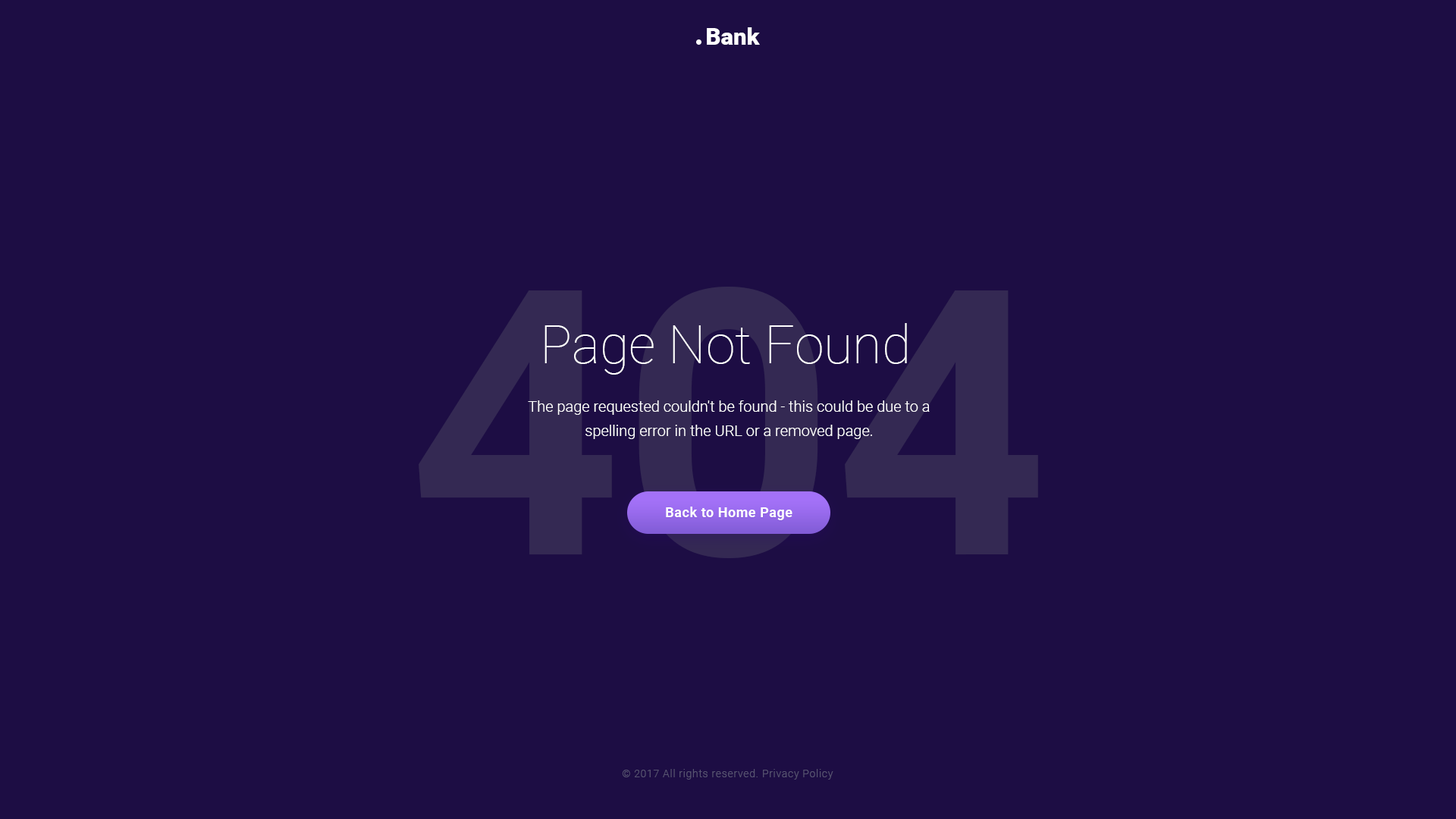
<style>
.page{position:relative;width:1456px;height:819px;background:#1d0d44}
.page>*{position:absolute;margin:0}
.t1{font:22.7px "Roboto-Black";color:#ffffff;scale:1.04 1}
.t2{font:371.6px "Roboto-Bold";color:#342953}
.t3{font:53.1px "Roboto-Thin";color:#ffffff}
.t4{font:15.2px/24.3px "Roboto-Light";color:#ffffff}
.t5{font:13.6px "Roboto-Bold";letter-spacing:0.03em;color:#ffffff}
.t6{font:10.6px "Roboto-Light";letter-spacing:0.05em;color:#585471}
</style>
<div class="page">
<p class="t1" style="left:707px;top:27px;width:53px;height:18px">Bank</p>
<p class="t2" style="left:419px;top:287px;width:619px;height:271px">404</p>
<p class="t3" style="left:544px;top:323px;width:363px;height:52px">Page Not Found</p>
<p class="t4" style="left:528px;top:400px;width:402px;height:39px;text-align:center">The page requested couldn't be found - this could be due to a spelling error in the URL or a removed page.</p>
<p class="t5" style="left:666px;top:507px;width:126px;height:13px">Back to Home Page</p>
<p class="t6" style="left:622px;top:769px;width:211px;height:11px">© 2017 All rights reserved. Privacy Policy</p>
</div>
